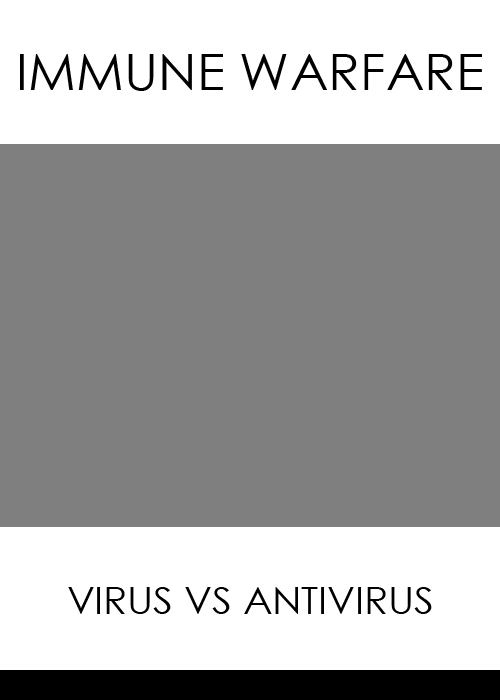
<style>
.page{position:relative;width:500px;height:700px;background:#7f7f7f}
.page>*{position:absolute;margin:0}
.t1{font:50.1px "CenturyGothic";color:#000000;scale:1.04 1}
.t2{font:37.9px "CenturyGothic";color:#000000;scale:1.04 1}
</style>
<div class="page">
<p class="t1" style="left:20px;top:54px;width:462px;height:37px">IMMUNE WARFARE</p>
<p class="t2" style="left:68px;top:587px;width:364px;height:27px">VIRUS VS ANTIVIRUS</p>
</div>
